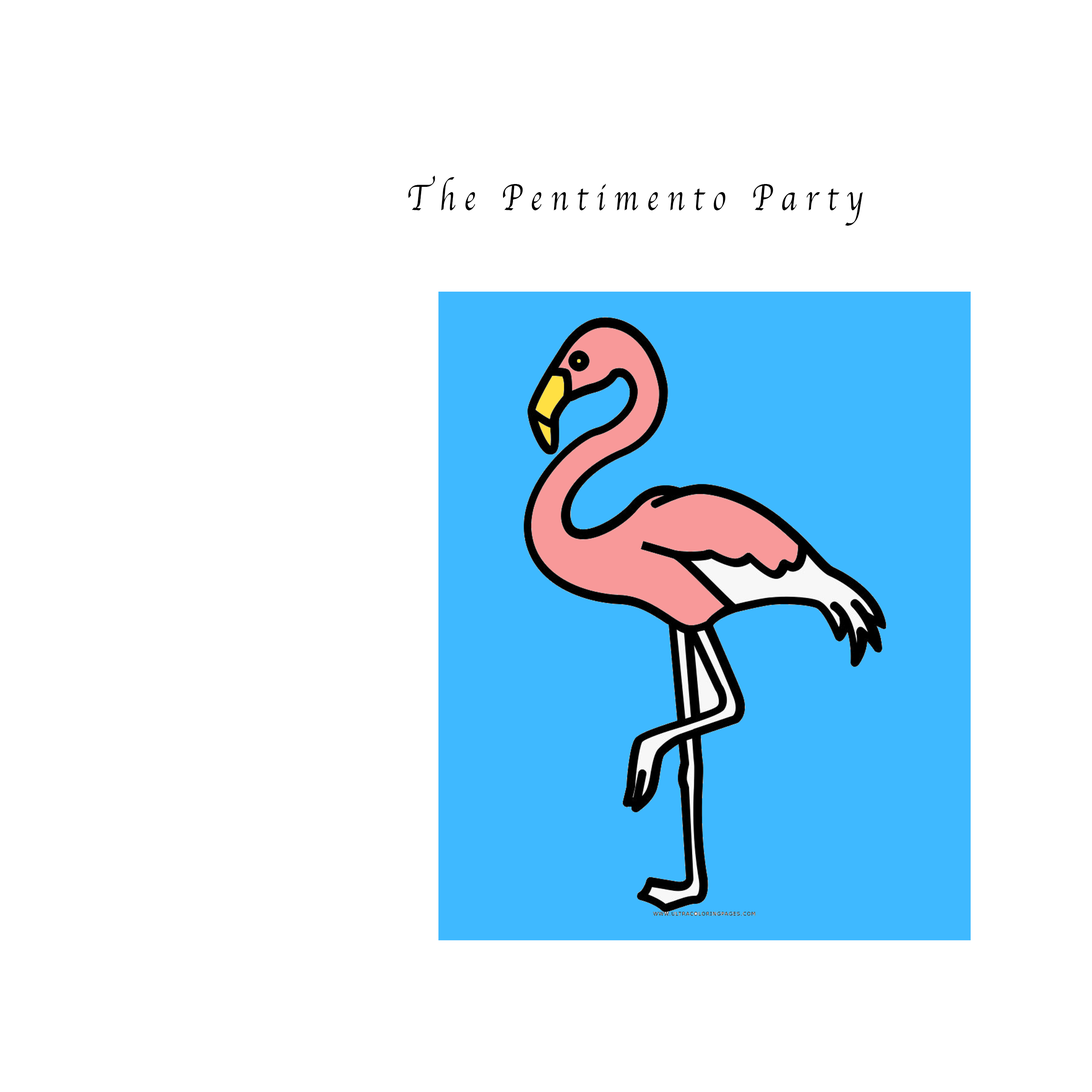
<style>
.page{position:relative;width:1092px;height:1092px;background:#ffffff}
.page>*{position:absolute;margin:0}
.t1{font:37.9px "Apple-Chancery";letter-spacing:0.28em;color:#000000;scale:0.81 1}
</style>
<div class="page">
<p class="t1" style="left:408px;top:176px;width:455px;height:50px">The Pentimento Party</p>
</div>
